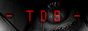
<style>
.page{position:relative;width:88px;height:31px}
.page>*{position:absolute;margin:0}
.t1{font:15.5px "HomespunTTBRK";color:#b10808;scale:0.86 1}
</style>
<div class="page">
<p class="t1" style="left:6px;top:10px;width:74px;height:12px">-  T D S  -</p>
</div>
